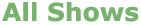
<style>
.page{position:relative;width:141px;height:25px;background:#ffffff}
.page>*{position:absolute;margin:0}
.t1{font:25px "Verdana-Bold";color:#78b36d}
</style>
<div class="page">
<p class="t1" style="left:2px;top:2px;width:137px;height:20px">All Shows</p>
</div>
